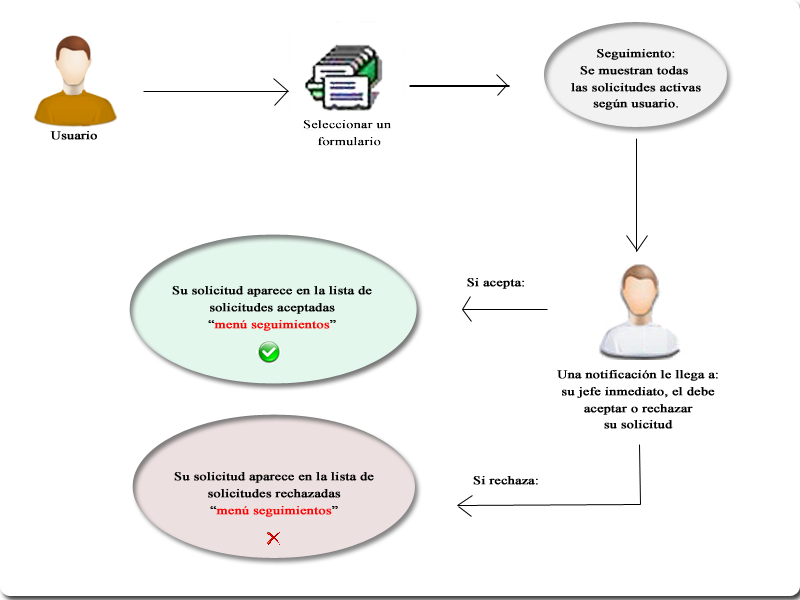
<style>
.page{position:relative;width:800px;height:600px;background:#ffffff}
.page>*{position:absolute;margin:0}
.t1{font:11.2px "TimesNewRomanPSMT";color:#000000;font-weight:bold;scale:1.25 1}
.t2{font:11.2px "TimesNewRomanPSMT";color:#ff0000;font-weight:bold;scale:1.25 1}
.t3{font:11.2px "TimesNewRomanPSMT";color:#ff0101;font-weight:bold;scale:1.25 1}
</style>
<div class="page">
<p class="t1" style="left:571px;top:49px;width:130px;height:61px;text-align:center">Seguimiento:<br>Se muestran todas <br>las solicitudes activas<br>según usuario.</p>
<p class="t1" style="left:50px;top:131px;width:47px;height:9px">Usuario</p>
<p class="t1" style="left:467px;top:278px;width:57px;height:11px">Si acepta:</p>
<p class="t1" style="left:172px;top:286px;width:200px;height:45px;text-align:center">Su solicitud aparece en la lista de<br>solicitudes aceptadas<br>“<span class="t2">menú seguimientos</span>”</p>
<p class="t1" style="left:557px;top:370px;width:161px;height:59px;text-align:center">Una notificación le llega a:<br>su jefe inmediato, el debe<br>aceptar o rechazar<br>su solicitud</p>
<p class="t1" style="left:174px;top:472px;width:200px;height:45px;text-align:center">Su solicitud aparece en la lista de<br>solicitudes rechazadas<br>“<span class="t3">menú seguimientos</span>”</p>
<p class="t1" style="left:473px;top:476px;width:65px;height:9px">Si rechaza:</p>
</div>
